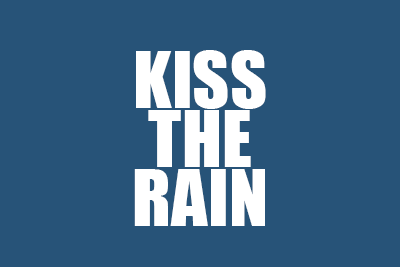
<style>
.page{position:relative;width:400px;height:267px;background:#275378}
.page>*{position:absolute;margin:0}
.t1{font:72px/59px "Impact";color:#ffffff}
</style>
<div class="page">
<p class="t1" style="left:134px;top:50px;width:132px;height:176px;text-align:center">KISS<br>THE<br>RAIN</p>
</div>
